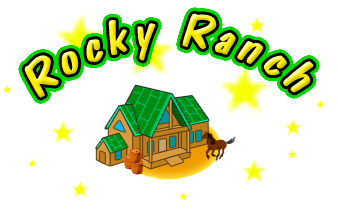
<style>
.page{position:relative;width:340px;height:220px;background:#ffffff}
.page>*{position:absolute;margin:0}
.t1{font:48.9px "DomCasualBT-Regular";letter-spacing:0.095em;font-style:italic}
</style>
<div class="page">
<p class="t1" style="left:24px;top:13px;width:290px;height:85px;rotate:-1deg">Rocky Ranch</p>
</div>
